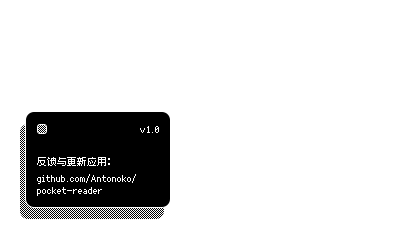
<style>
.page{position:relative;width:400px;height:240px;background:#ffffff}
.page>*{position:absolute;margin:0}
.t1{font:10px "Fusion-Pixel-10px-Proportional-zh_hans-Regular";color:#ffffff}
.t2{font:10px/12px "Fusion-Pixel-10px-Proportional-zh_hans-Regular";color:#ffffff}
</style>
<div class="page">
<p class="t1" style="left:140px;top:126px;width:19px;height:7px">v1.0</p>
<p class="t2" style="left:37px;top:157px;width:99px;height:39px"><span class="t1">反馈与更新应用：<br></span>github.com/Antonoko/<br>pocket-reader</p>
</div>
